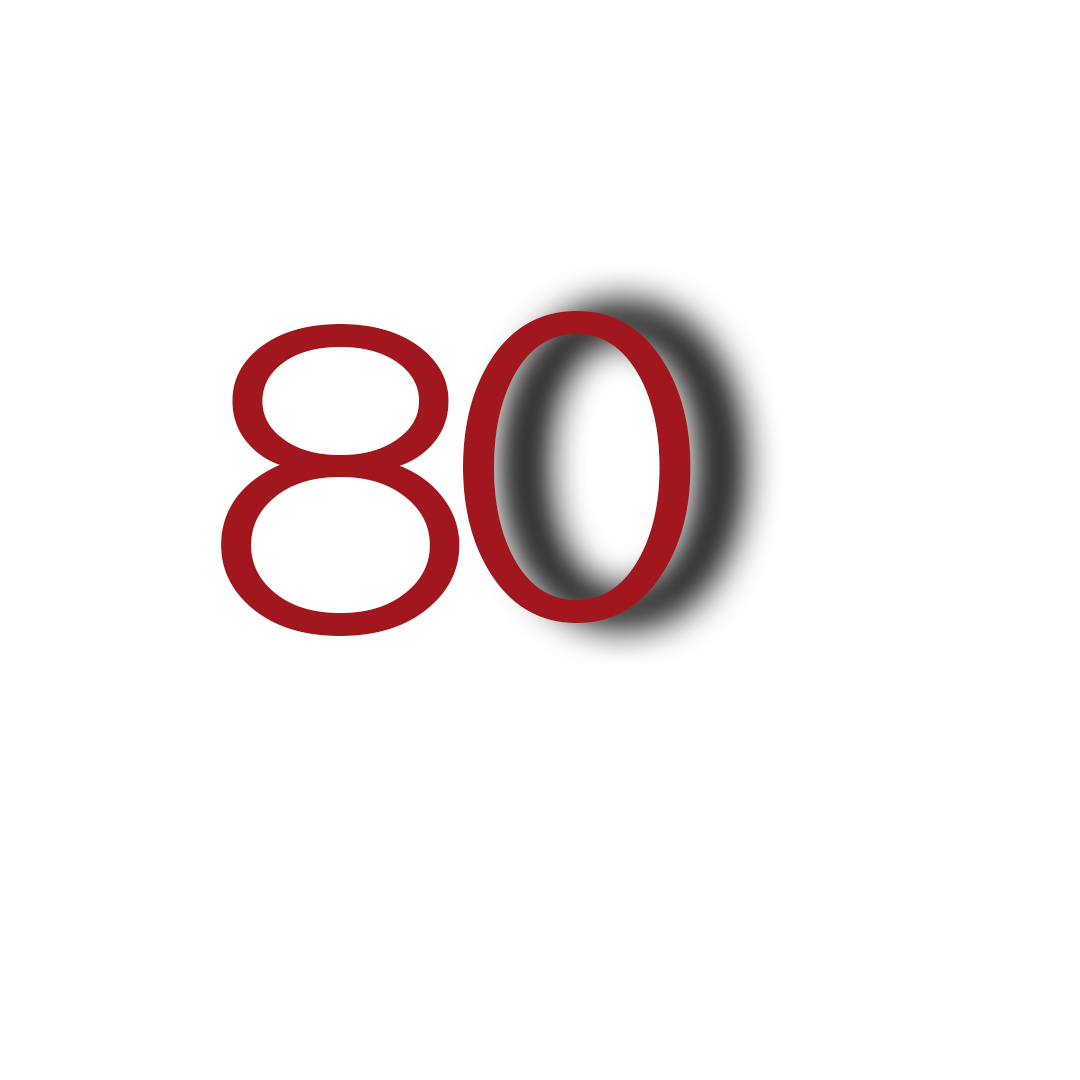
<style>
.page{position:relative;width:1080px;height:1080px;background:#ffffff}
.page>*{position:absolute;margin:0}
.t1{font:415.1px "Gulim";color:#a2171d;scale:1.21 1}
</style>
<div class="page">
<p class="t1" style="left:463px;top:311px;width:228px;height:312px">0</p>
<p class="t1" style="left:221px;top:324px;width:239px;height:312px">8</p>
</div>
